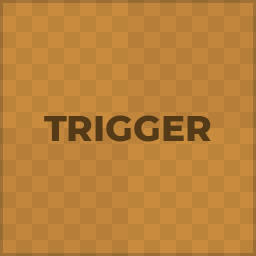
<style>
.page{position:relative;width:256px;height:256px;background:#b67e39}
.page>*{position:absolute;margin:0}
.t1{font:36px "Montserrat-ExtraBold";color:#553a18;text-transform:uppercase}
</style>
<div class="page">
<p class="t1" style="left:44px;top:115px;width:167px;height:27px">Trigger</p>
</div>
